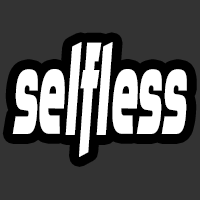
<style>
.page{position:relative;width:200px;height:200px;background:#333333}
.page>*{position:absolute;margin:0}
.t1{font:156.5px "Ritafurey-BoldItalic";letter-spacing:-0.02em;color:#ffffff;scale:0.35 1}
</style>
<div class="page">
<p class="t1" style="left:12px;top:42px;width:175px;height:115px">selfless</p>
</div>
